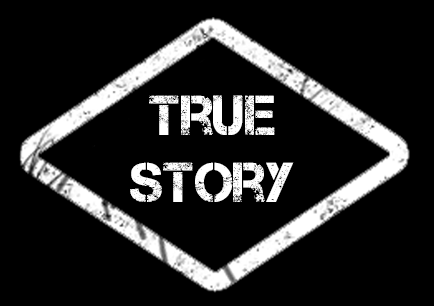
<style>
.page{position:relative;width:434px;height:306px;background:#000000}
.page>*{position:absolute;margin:0}
.t1{font:56px "Captureit";color:#ffffff}
</style>
<div class="page">
<p class="t1" style="left:130px;top:95px;width:164px;height:107px;text-align:center">True<br>story</p>
</div>
